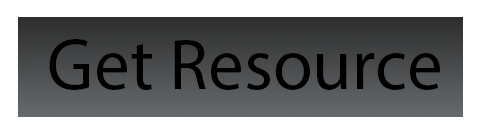
<style>
.page{position:relative;width:484px;height:135px;background:#ffffff}
.page>*{position:absolute;margin:0}
.t1{font:72px "MyriadPro-Regular";color:#000000}
</style>
<div class="page">
<p class="t1" style="left:49px;top:39px;width:391px;height:51px">Get Resource</p>
</div>
